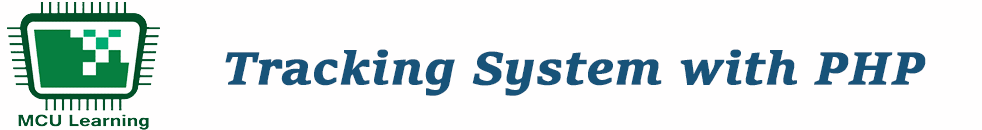
<style>
.page{position:relative;width:982px;height:130px;background:#fffefe}
.page>*{position:absolute;margin:0}
.t1{font:48px "SitkaSmall-BoldItalic";color:#185379;font-weight:bold}
</style>
<div class="page">
<p class="t1" style="left:225px;top:49px;width:701px;height:47px">Tracking System with PHP</p>
</div>
